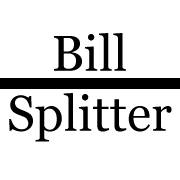
<style>
.page{position:relative;width:180px;height:180px;background:#ffffff}
.page>*{position:absolute;margin:0}
.t1{font:50px "Georgia";color:#000000}
</style>
<div class="page">
<p class="t1" style="left:9px;top:33px;width:163px;height:109px;text-align:center">Bill<br>Splitter</p>
</div>
